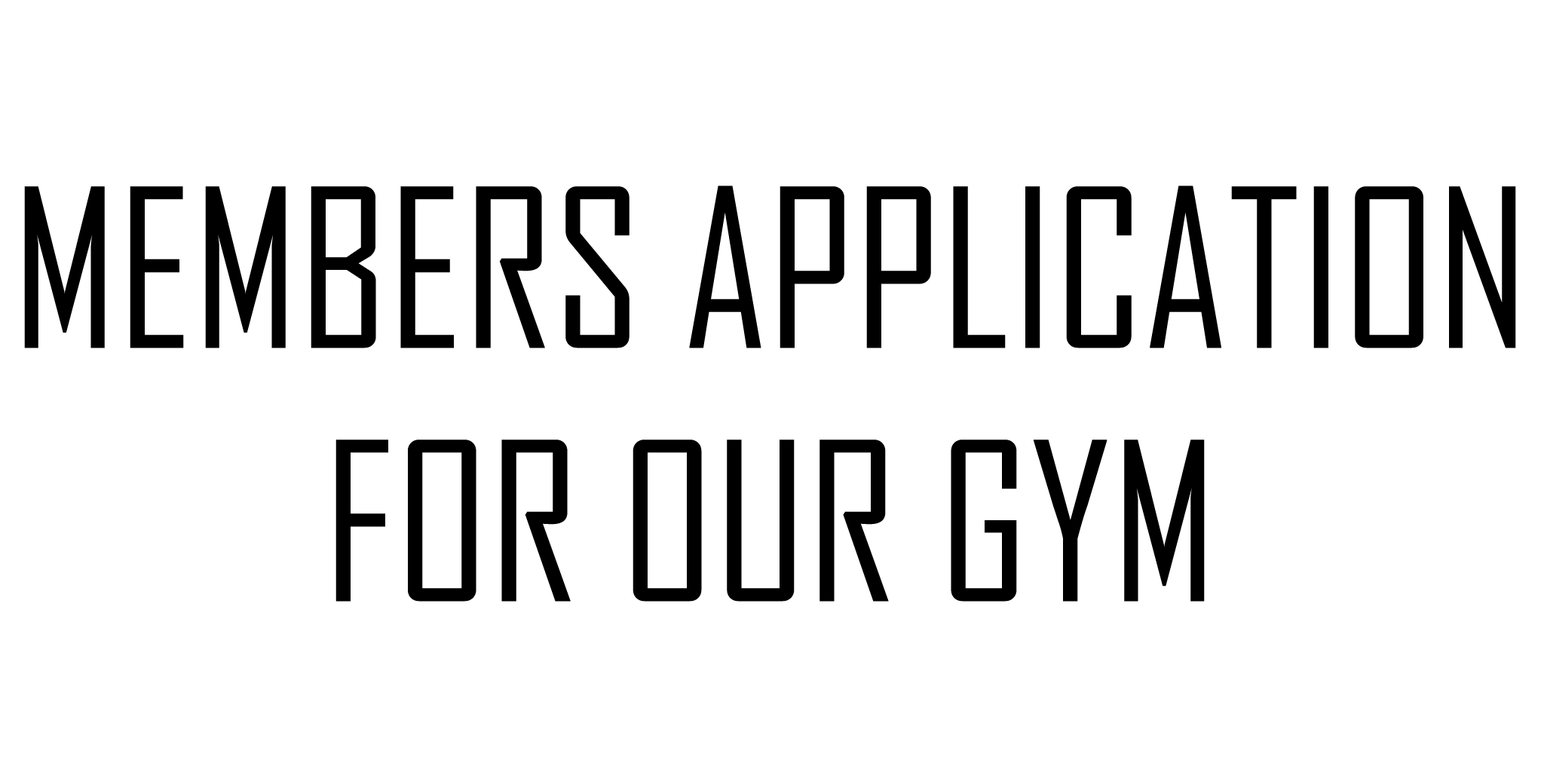
<style>
.page{position:relative;width:1544px;height:772px;background:#ffffff}
.page>*{position:absolute;margin:0}
.t1{font:211.1px "AgencyFB-Reg";color:#000000}
</style>
<div class="page">
<p class="t1" style="left:24px;top:185px;width:1492px;height:417px;text-align:center">MEMBERS APPLICATION<br>FOR OUR GYM</p>
</div>
